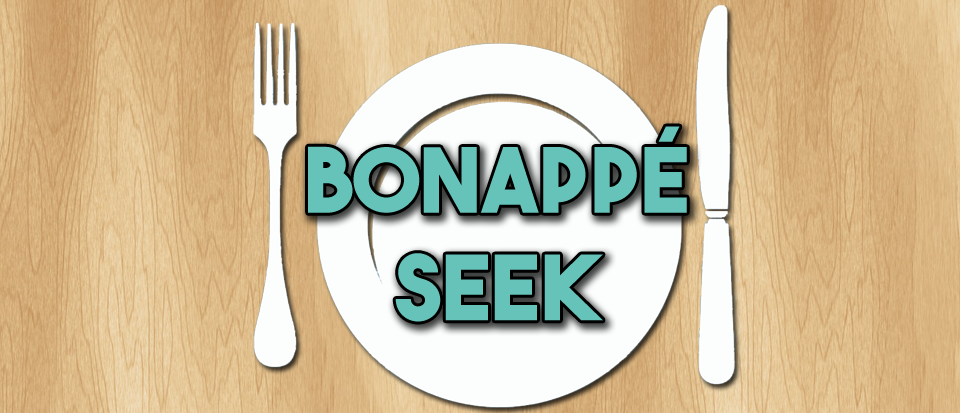
<style>
.page{position:relative;width:960px;height:413px}
.page>*{position:absolute;margin:0}
.t1{font:89.6px "TheBoldFont";color:#65c3ba;text-transform:uppercase}
</style>
<div class="page">
<p class="t1" style="left:308px;top:126px;width:379px;height:196px;text-align:center">BonAppé<br>SEEK</p>
</div>
